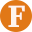
<style>
.page{position:relative;width:32px;height:32px;background:#e17817}
.page>*{position:absolute;margin:0}
.t1{font:32.4px "SourceSerifPro-Bold";color:#fff4ed;scale:0.96 1}
</style>
<div class="page">
<p class="t1" style="left:8px;top:5px;width:17px;height:22px">F</p>
</div>
